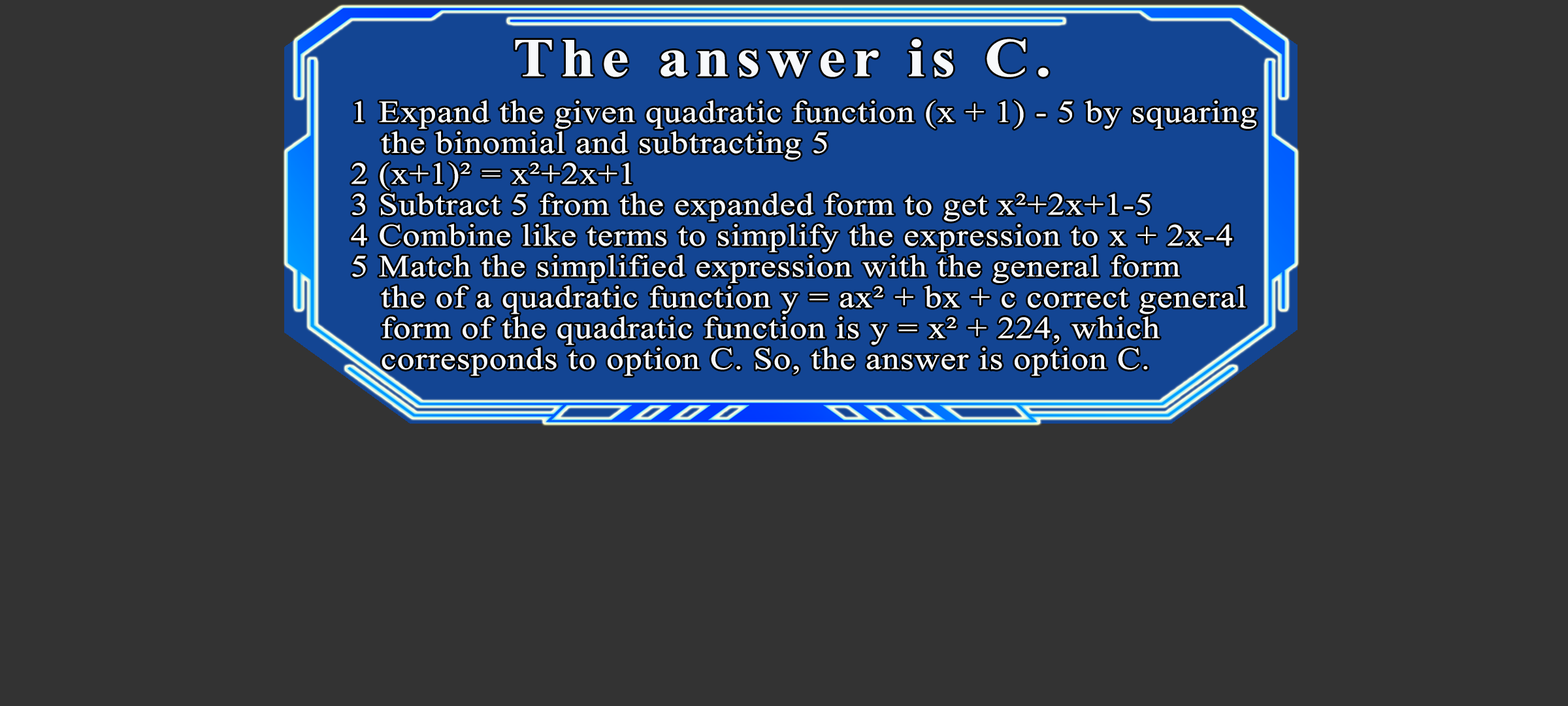
<style>
.page{position:relative;width:1568px;height:706px;background:#333333}
.page>*{position:absolute;margin:0}
.t1{font:54.4px "TimesNewRomanPS-BoldMT";letter-spacing:0.115em;color:#f7f9fb;scale:1.12 1}
.t2{font:30.9px/30.9px "TimesNewRomanPSMT";letter-spacing:0.028em;color:#f7f9fb;scale:1.12 1}
</style>
<div class="page">
<p class="t1" style="left:515px;top:39px;width:534px;height:38px">The answer is C.</p>
<p class="t2" style="left:351px;top:100px;width:906px;height:276px">1 Expand the given quadratic function (x + 1) - 5 by squaring<br>  the binomial and subtracting 5<br>2 (x+1)² = x²+2x+1<br>3 Subtract 5 from the expanded form to get x²+2x+1-5<br>4 Combine like terms to simplify the expression to x + 2x-4<br>5 Match the simplified expression with the general form<br>  the of a quadratic function y = ax² + bx + c correct general<br>  form of the quadratic function is y = x² + 224, which<br>  corresponds to option C. So, the answer is option C.</p>
</div>
